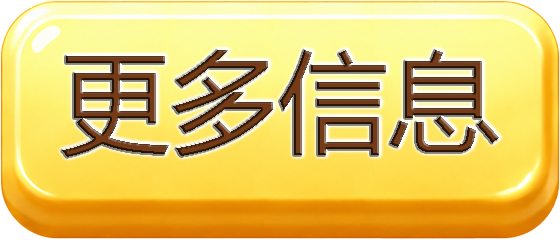
<style>
.page{position:relative;width:560px;height:240px}
.page>*{position:absolute;margin:0}
.t1{font:109.3px "MicrosoftYaHeiUI"}
</style>
<div class="page">
<p class="t1" style="left:62px;top:50px;width:437px;height:107px">更多信息</p>
</div>
